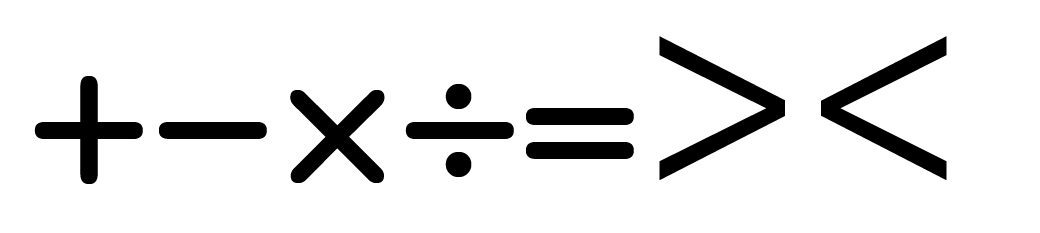
<style>
.page{position:relative;width:1040px;height:233px;background:#ffffff}
.page>*{position:absolute;margin:0}
.t1{font:270px "BKoodakBold";color:#000000}
.t2{font:270px "MyriadPro-Regular";color:#000000}
</style>
<div class="page">
<p class="t1" style="left:34px;top:36px;width:913px;height:148px">+-×÷=<span class="t2">&gt;&lt;</span></p>
</div>
